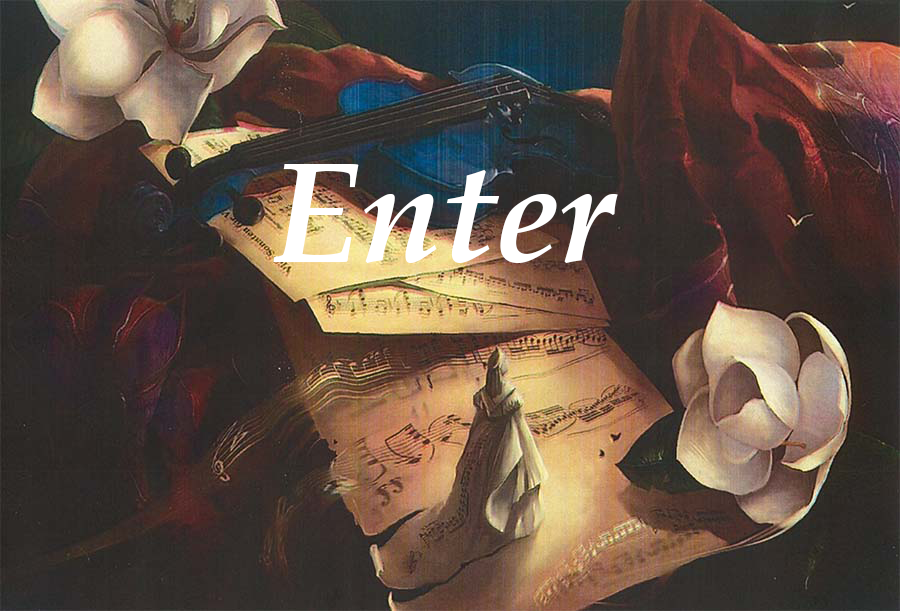
<style>
.page{position:relative;width:900px;height:611px}
.page>*{position:absolute;margin:0}
.t1{font:141.7px "BookAntiqua-BoldItalic";color:#ffffff}
</style>
<div class="page">
<p class="t1" style="left:273px;top:164px;width:345px;height:99px">Enter</p>
</div>
